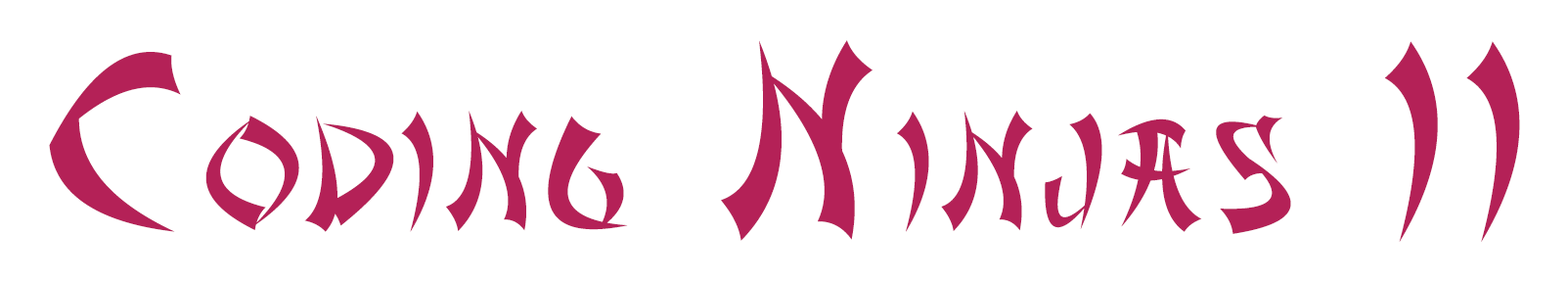
<style>
.page{position:relative;width:1568px;height:282px;background:#ffffff}
.page>*{position:absolute;margin:0}
.t1{font:146.7px "AsianDelight";letter-spacing:0.1em;color:#b42157;scale:0.93 1}
.t2{font:244.5px "AsianDelight";letter-spacing:0.1em;color:#b42157;scale:0.93 1}
</style>
<div class="page">
<p class="t1" style="left:49px;top:40px;width:1471px;height:202px"><span class="t2">C</span>ODING<span class="t2"> N</span>INJAS<span class="t2"> II</span></p>
</div>
